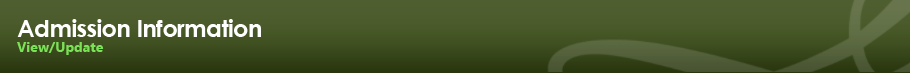
<style>
.page{position:relative;width:910px;height:73px}
.page>*{position:absolute;margin:0}
.t1{font:24px "CenturyGothic-Bold";letter-spacing:-0.025em;color:#ffffff}
.t2{font:14px "SegoeUI-Bold";color:#7be257}
</style>
<div class="page">
<p class="t1" style="left:17px;top:19px;width:244px;height:18px">Admission Information</p>
<p class="t2" style="left:17px;top:42px;width:87px;height:13px">View/Update</p>
</div>
